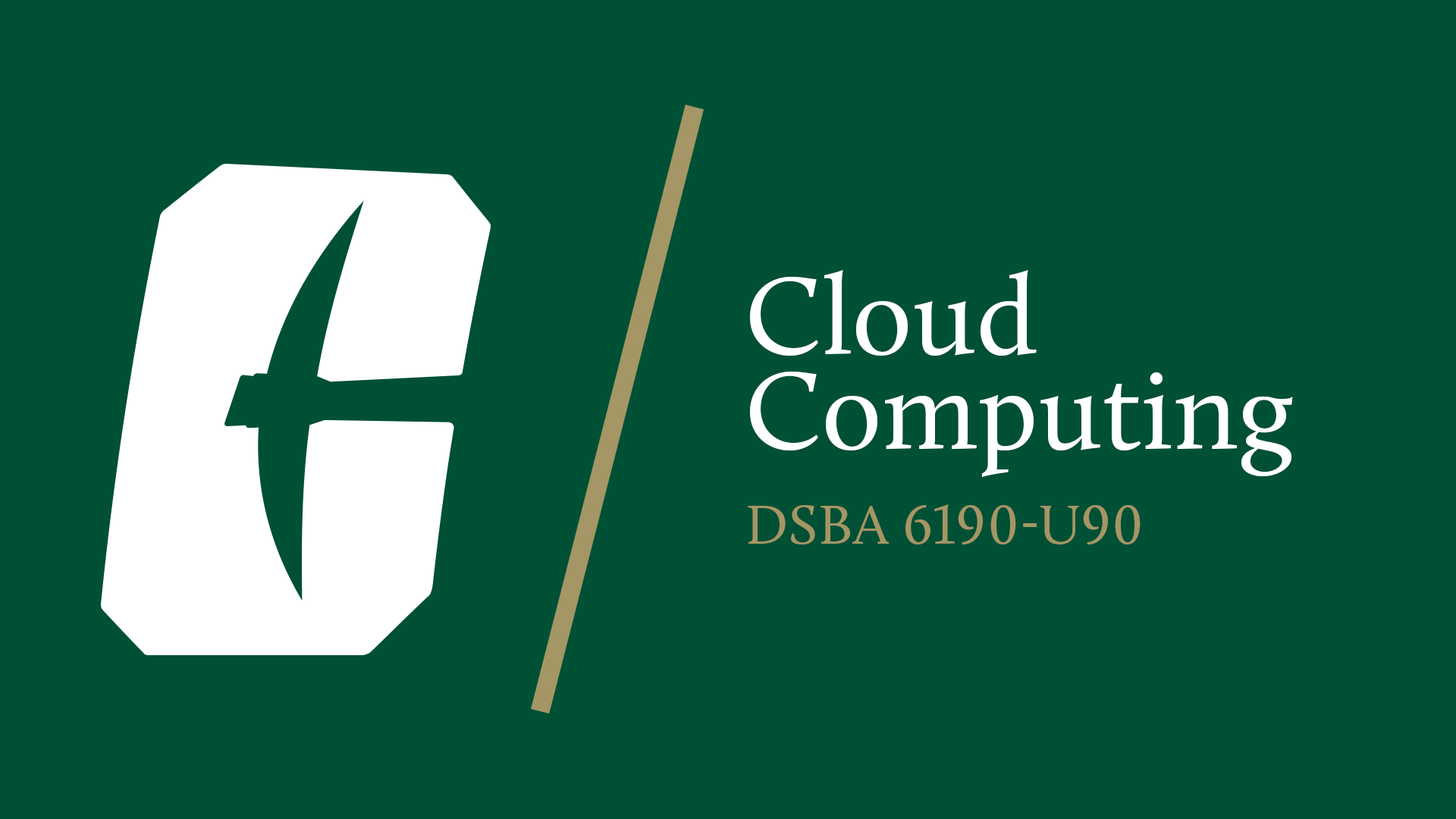
<style>
.page{position:relative;width:1456px;height:819px;background:#005035}
.page>*{position:absolute;margin:0}
.t1{font:113.7px/94.8px "Calluna-Regular";color:#ffffff}
.t2{font:56.9px/94.8px "Calluna-Regular";color:#a49665;text-transform:uppercase}
</style>
<div class="page">
<p class="t1" style="left:748px;top:270px;width:545px;height:274px">Cloud<br>Computing<br><span class="t2">DSBA 6190-U90</span></p>
</div>
